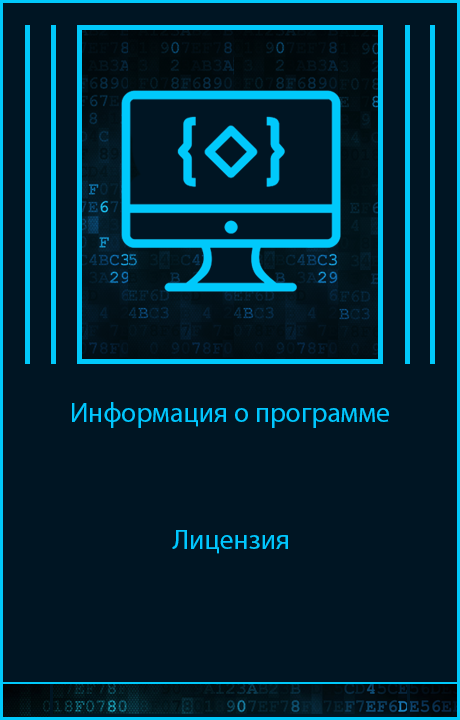
<style>
.page{position:relative;width:460px;height:720px;background:#001523}
.page>*{position:absolute;margin:0}
.t1{font:27.8px "MyriadPro-Regular";color:#00c7ff}
</style>
<div class="page">
<p class="t1" style="left:72px;top:402px;width:317px;height:26px">Информация о программе</p>
<p class="t1" style="left:172px;top:530px;width:116px;height:24px">Лицензия</p>
</div>
